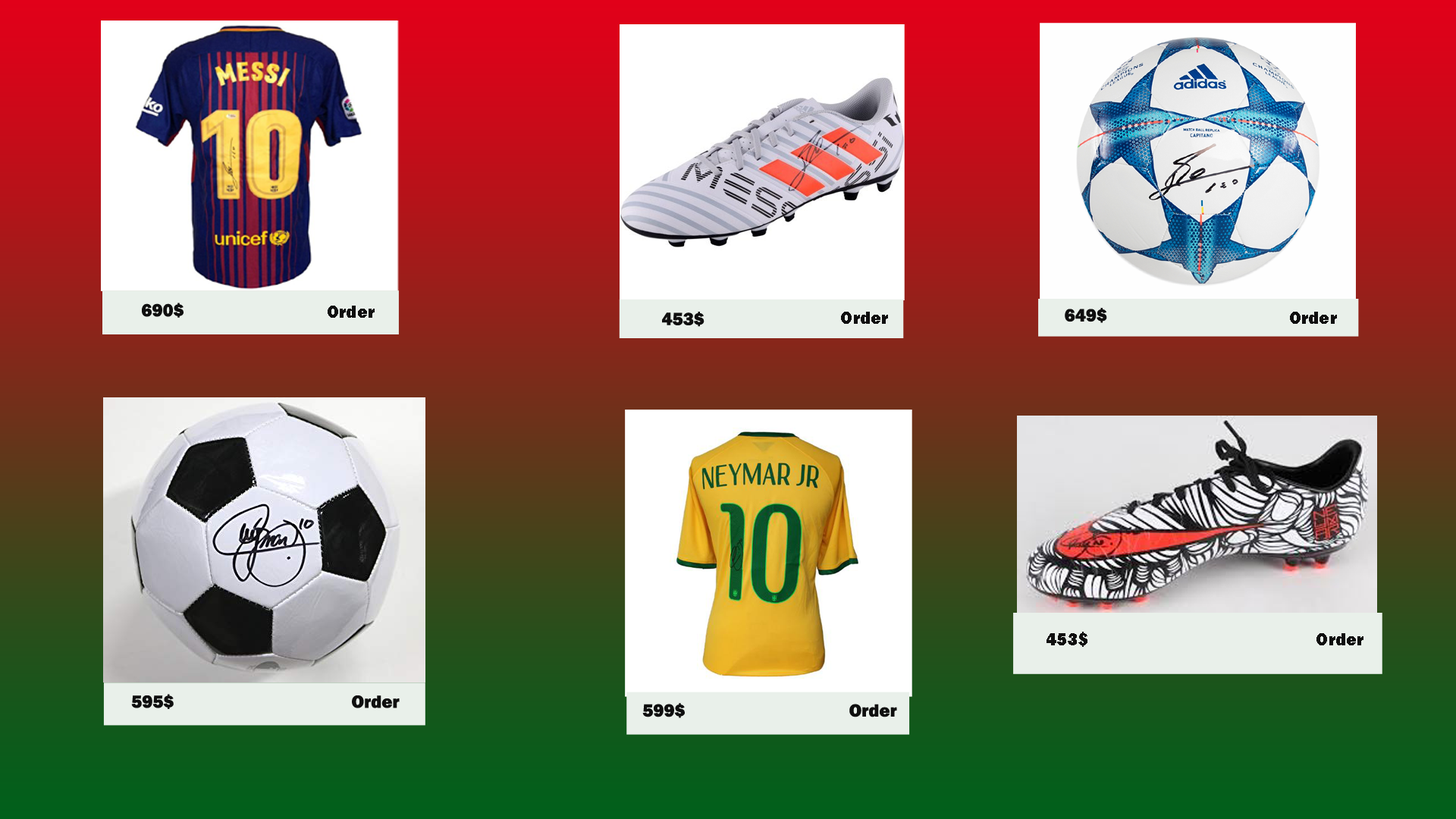
<style>
.page{position:relative;width:1456px;height:819px}
.page>*{position:absolute;margin:0}
.t1{font:18.2px "FranklinGothic-Heavy";color:#0f0f0f}
</style>
<div class="page">
<p class="t1" style="left:142px;top:303px;width:42px;height:15px">690$</p>
<p class="t1" style="left:328px;top:306px;width:47px;height:12px">Order</p>
<p class="t1" style="left:662px;top:312px;width:42px;height:15px">453$</p>
<p class="t1" style="left:841px;top:312px;width:47px;height:12px">Order</p>
<p class="t1" style="left:1065px;top:308px;width:42px;height:15px">649$</p>
<p class="t1" style="left:1290px;top:312px;width:47px;height:12px">Order</p>
<p class="t1" style="left:1046px;top:632px;width:317px;height:15px">453$                                                  Order</p>
<p class="t1" style="left:131px;top:694px;width:269px;height:15px">595$                                       Order</p>
<p class="t1" style="left:642px;top:703px;width:255px;height:15px">599$                                    Order</p>
</div>
